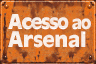
<style>
.page{position:relative;width:96px;height:64px}
.page>*{position:absolute;margin:0}
.t1{font:22px/18px "CartesDisplaySSK";letter-spacing:-0.005em;color:#f8eee7}
.t2{font:21px/18px "CartesDisplaySSK";letter-spacing:-0.045em;color:#f8eee7}
.t3{font:19px/18px "CartesDisplaySSK";letter-spacing:-0.045em;color:#f8eee7}
</style>
<div class="page">
<p class="t1" style="left:8px;top:14px;width:83px;height:34px"><span class="t2">Acesso </span><span class="t3">ao<br></span>Arsenal</p>
</div>
